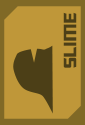
<style>
.page{position:relative;width:85px;height:125px;background:#bf9739}
.page>*{position:absolute;margin:0}
.t1{font:20px "TransformersMovie";letter-spacing:0.06em;color:#4c3f17}
.t2{font:20px "TransformersMovie";letter-spacing:0.04em;color:#4c3f17}
.t3{font:20px "TransformersMovie";letter-spacing:0.02em;color:#4c3f17}
</style>
<div class="page">
<p class="t1" style="left:63px;top:12px;width:14px;height:56px;rotate:-90deg"><span class="t2">s</span><span class="t3">l</span>im<span class="t2">e</span></p>
</div>
